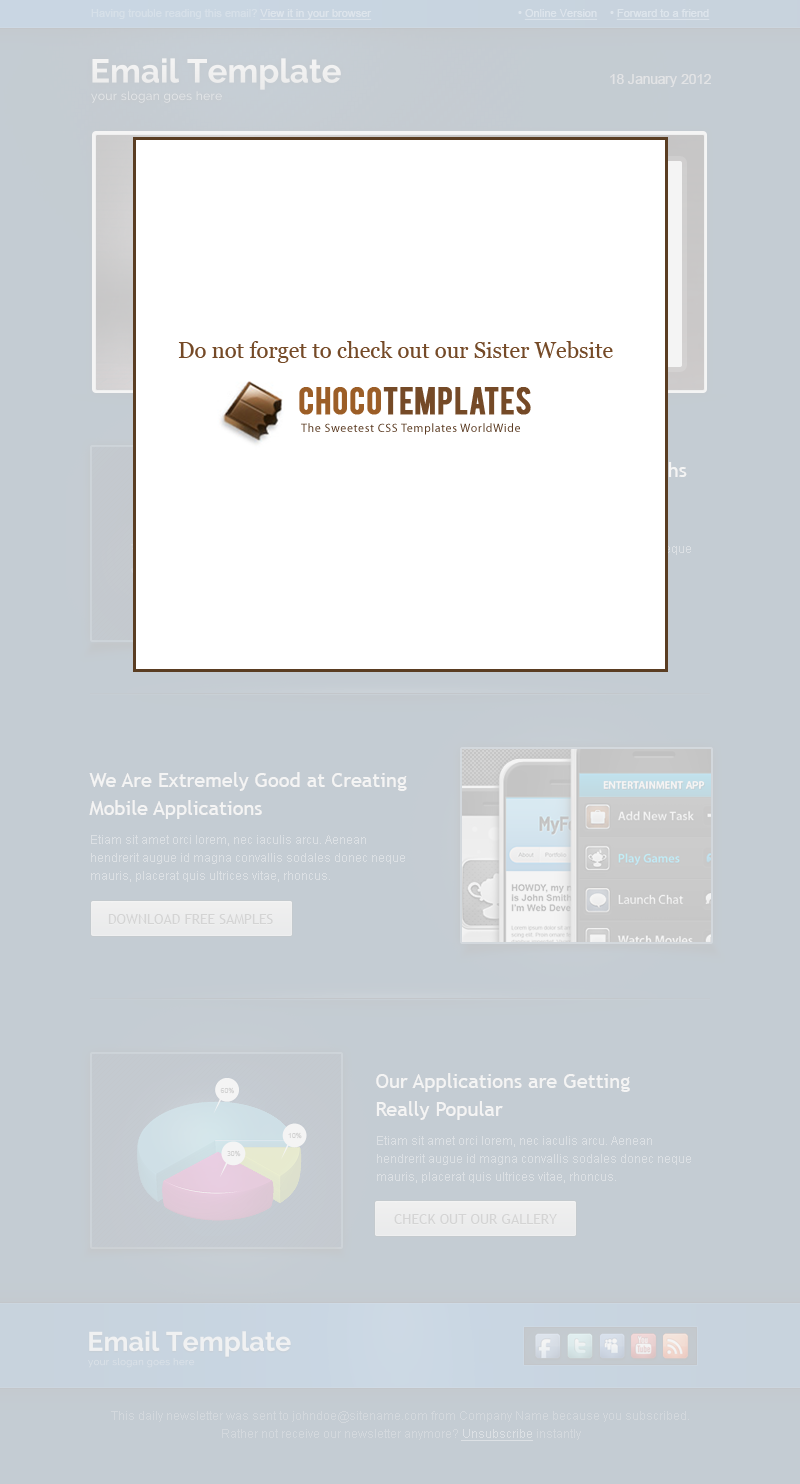
<style>
.page{position:relative;width:800px;height:1484px;background:#c4ccd3}
.page>*{position:absolute;margin:0}
.t1{font:11px "ArialMT";color:#d6e0e9}
.t2{font:11px "ArialMT";color:#d6e0e9;text-decoration:underline}
.t3{font:11px "ArialMT";color:#dde5ec;text-decoration:underline}
.t4{font:11px "ArialMT";color:#dde5ec}
.t5{font:14px "ArialMT";color:#e2e4e6}
.t6{font:20px/28px "TrebuchetMS";color:#ffffff}
.t7{font:12px/18px "ArialMT";color:#dce0e4}
.t8{font:14px "TrebuchetMS";color:#d4d4d4;text-transform:uppercase}
.t9{font:12px/18px "ArialMT";color:#d3d8dd}
.t10{font:12px/18px "ArialMT";color:#d3d8dd;text-decoration:underline}
</style>
<div class="page">
<p class="t1" style="left:91px;top:9px;width:281px;height:11px">Having trouble reading this email? <span class="t2">View it in your browser</span></p>
<p class="t3" style="left:518px;top:9px;width:80px;height:11px"><span class="t4">• </span>Online Version</p>
<p class="t3" style="left:610px;top:9px;width:100px;height:11px"><span class="t4">• </span>Forward to a friend</p>
<p class="t5" style="left:610px;top:74px;width:101px;height:13px">18 January 2012</p>
<p class="t6" style="left:89px;top:772px;width:318px;height:47px">We Are Extremely Good at Creating<br>Mobile Applications</p>
<p class="t7" style="left:91px;top:835px;width:314px;height:47px">Etiam sit amet orci lorem, nec iaculis arcu. Aenean hendrerit augue id magna convallis sodales donec neque mauris, placerat quis ultrices vitae, rhoncus.</p>
<p class="t8" style="left:108px;top:914px;width:165px;height:10px">download free samples</p>
<p class="t6" style="left:376px;top:1073px;width:254px;height:47px">Our Applications are Getting<br>Really Popular</p>
<p class="t7" style="left:377px;top:1136px;width:314px;height:47px">Etiam sit amet orci lorem, nec iaculis arcu. Aenean hendrerit augue id magna convallis sodales donec neque mauris, placerat quis ultrices vitae, rhoncus.</p>
<p class="t8" style="left:394px;top:1214px;width:163px;height:10px">check out our gallery</p>
<p class="t9" style="left:111px;top:1411px;width:578px;height:30px;text-align:center">This daily newsletter was sent to johndoe@sitename.com from Company Name because you subscribed.<br>Rather not receive our newsletter anymore? <span class="t10">Unsubscribe</span> instantly</p>
</div>
